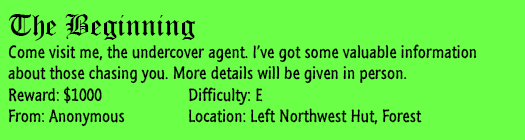
<style>
.page{position:relative;width:525px;height:140px;background:#6cff47}
.page>*{position:absolute;margin:0}
.t1{font:18px "SegoeMarker";color:#000000}
.t2{font:30px "OldEnglishTextMT";color:#000000}
</style>
<div class="page">
<p class="t1" style="left:8px;top:14px;width:469px;height:113px"><span class="t2">The Beginning<br></span>Come visit me, the undercover agent. I’ve got some valuable information <br>about those chasing you. More details will be given in person.<br>Reward: $1000   Difficulty: E<br>From: Anonymous  Location: Left Northwest Hut, Forest</p>
</div>
